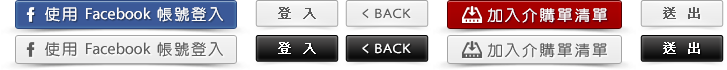
<style>
.page{position:relative;width:727px;height:70px}
.page>*{position:absolute;margin:0}
.t1{font:16px "MyriadPro-Regular";color:#ffffff}
.t2{font:16px "¥þ¯u¤¤¶êÅé";letter-spacing:0.05em;color:#ffffff}
.t3{font:13px "PMingLiU";color:#5b5b5b;font-weight:bold}
.t4{font:16.6px "MyriadPro-Light";color:#5b5b5b;font-weight:bold;scale:0.68 1}
.t5{font:12.9px "MyriadPro-Light";letter-spacing:0.025em;color:#5b5b5b;font-weight:bold;scale:1.19 1}
.t6{font:15.9px "¥þ¯u¤¤¶êÅé";letter-spacing:0.075em;color:#ffffff}
.t7{font:16px "MyriadPro-Regular";color:#5b5b5b}
.t8{font:16px "¥þ¯u¤¤¶êÅé";letter-spacing:0.05em;color:#5b5b5b}
.t9{font:13px "PMingLiU";color:#ffffff;font-weight:bold}
.t10{font:16.6px "MyriadPro-Light";color:#ffffff;font-weight:bold;scale:0.68 1}
.t11{font:12.9px "MyriadPro-Light";letter-spacing:0.025em;color:#ffffff;font-weight:bold;scale:1.19 1}
.t12{font:15.9px "¥þ¯u¤¤¶êÅé";letter-spacing:0.075em;color:#5b5b5b}
</style>
<div class="page">
<p class="t1" style="left:45px;top:7px;width:178px;height:15px"><span class="t2">使用 </span>Facebook <span class="t2">帳號登入</span></p>
<p class="t1" style="left:45px;top:7px;width:178px;height:15px"><span class="t2">使用 </span>Facebook <span class="t2">帳號登入</span></p>
<p class="t3" style="left:278px;top:7px;width:38px;height:12px">登  入</p>
<p class="t4" style="left:362px;top:8px;width:7px;height:11px">&lt;</p>
<p class="t5" style="left:375px;top:8px;width:36px;height:11px">BACK</p>
<p class="t6" style="left:487px;top:8px;width:120px;height:15px">加入介購單清單</p>
<p class="t6" style="left:487px;top:8px;width:120px;height:15px">加入介購單清單</p>
<p class="t3" style="left:663px;top:7px;width:37px;height:12px">送  出</p>
<p class="t7" style="left:45px;top:42px;width:178px;height:15px"><span class="t8">使用 </span>Facebook <span class="t8">帳號登入</span></p>
<p class="t7" style="left:45px;top:42px;width:178px;height:15px"><span class="t8">使用 </span>Facebook <span class="t8">帳號登入</span></p>
<p class="t9" style="left:278px;top:42px;width:38px;height:12px">登  入</p>
<p class="t10" style="left:362px;top:43px;width:7px;height:11px">&lt;</p>
<p class="t11" style="left:375px;top:43px;width:36px;height:11px">BACK</p>
<p class="t12" style="left:487px;top:43px;width:120px;height:15px">加入介購單清單</p>
<p class="t12" style="left:487px;top:43px;width:120px;height:15px">加入介購單清單</p>
<p class="t9" style="left:663px;top:42px;width:37px;height:12px">送  出</p>
</div>
